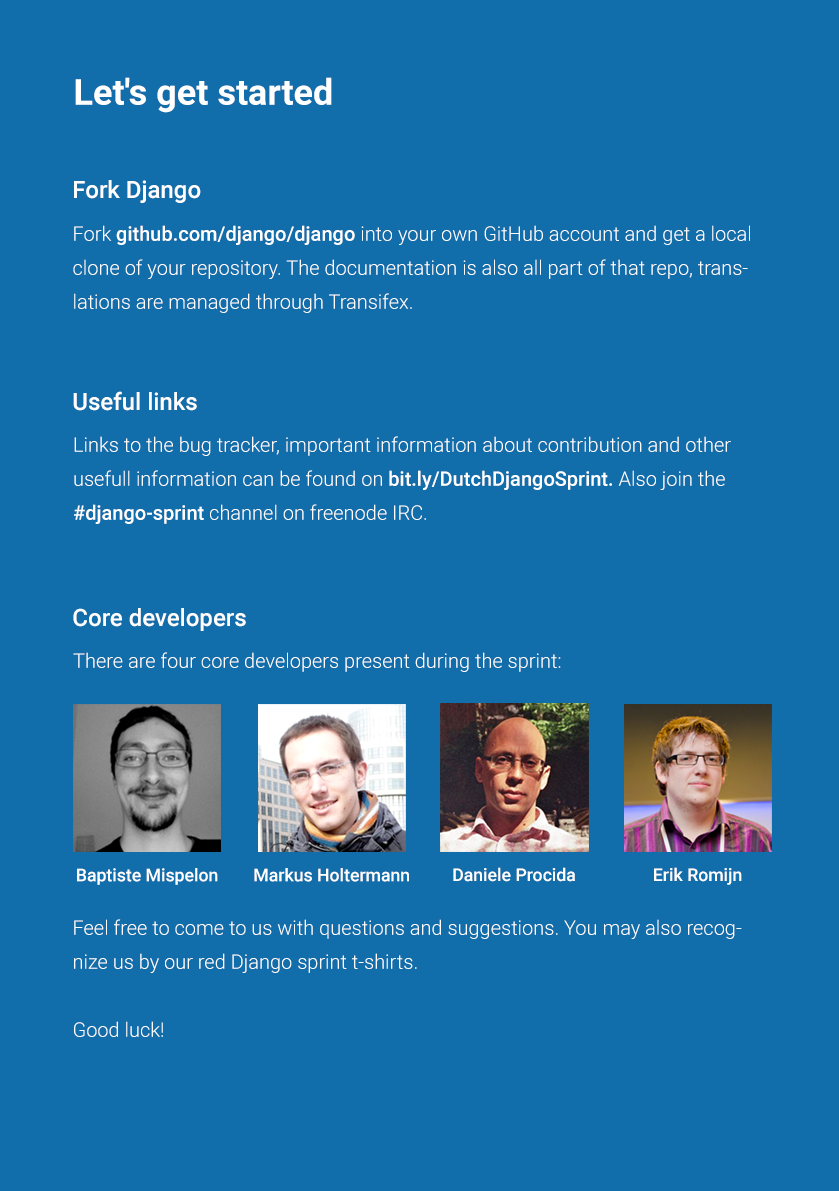
<style>
.page{position:relative;width:839px;height:1191px;background:#126eaa}
.page>*{position:absolute;margin:0}
.t1{font:36px "Roboto-Bold";color:#ffffff}
.t2{font:24px "Roboto-Medium";color:#ffffff}
.t3{font:20px/34px "Roboto-Light";color:#ffffff}
.t4{font:20px/34px "Roboto-Medium";color:#ffffff}
.t5{font:20px "Roboto-Light";color:#ffffff}
.t6{font:17.6px "Roboto-Medium";color:#ffffff}
</style>
<div class="page">
<p class="t1" style="left:75px;top:77px;width:257px;height:36px">Let's get started</p>
<p class="t2" style="left:74px;top:180px;width:127px;height:23px">Fork Django</p>
<p class="t3" style="left:73px;top:225px;width:677px;height:88px">Fork <span class="t4">github.com/django/django</span> into your own GitHub account and get a local clone of your repository. The documentation is also all part of that repo, translations are managed through Transifex.</p>
<p class="t2" style="left:73px;top:391px;width:124px;height:20px">Useful links</p>
<p class="t3" style="left:74px;top:436px;width:657px;height:88px">Links to the bug tracker, important information about contribution and other usefull information can be found on <span class="t4">bit.ly/DutchDjangoSprint. </span>Also join the<br><span class="t4">#django-sprint</span> channel on freenode IRC.</p>
<p class="t2" style="left:73px;top:608px;width:173px;height:23px">Core developers</p>
<p class="t5" style="left:73px;top:652px;width:488px;height:20px">There are four core developers present during the sprint:</p>
<p class="t6" style="left:77px;top:868px;width:141px;height:17px">Baptiste Mispelon</p>
<p class="t6" style="left:254px;top:868px;width:155px;height:14px">Markus Holtermann</p>
<p class="t6" style="left:453px;top:867px;width:122px;height:15px">Daniele Procida</p>
<p class="t6" style="left:654px;top:867px;width:88px;height:18px">Erik Romijn</p>
<p class="t3" style="left:74px;top:919px;width:668px;height:118px">Feel free to come to us with questions and suggestions. You may also recognize us by our red Django sprint t-shirts.<br><br>Good luck!</p>
</div>
